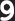
<style>
.page{position:relative;width:15px;height:21px;background:#ffffff}
.page>*{position:absolute;margin:0}
.t1{font:30.6px "CourierNewPS-BoldMT";color:#ffffff}
</style>
<div class="page">
<p class="t1" style="left:0px;top:0px;width:14px;height:21px">9</p>
</div>
